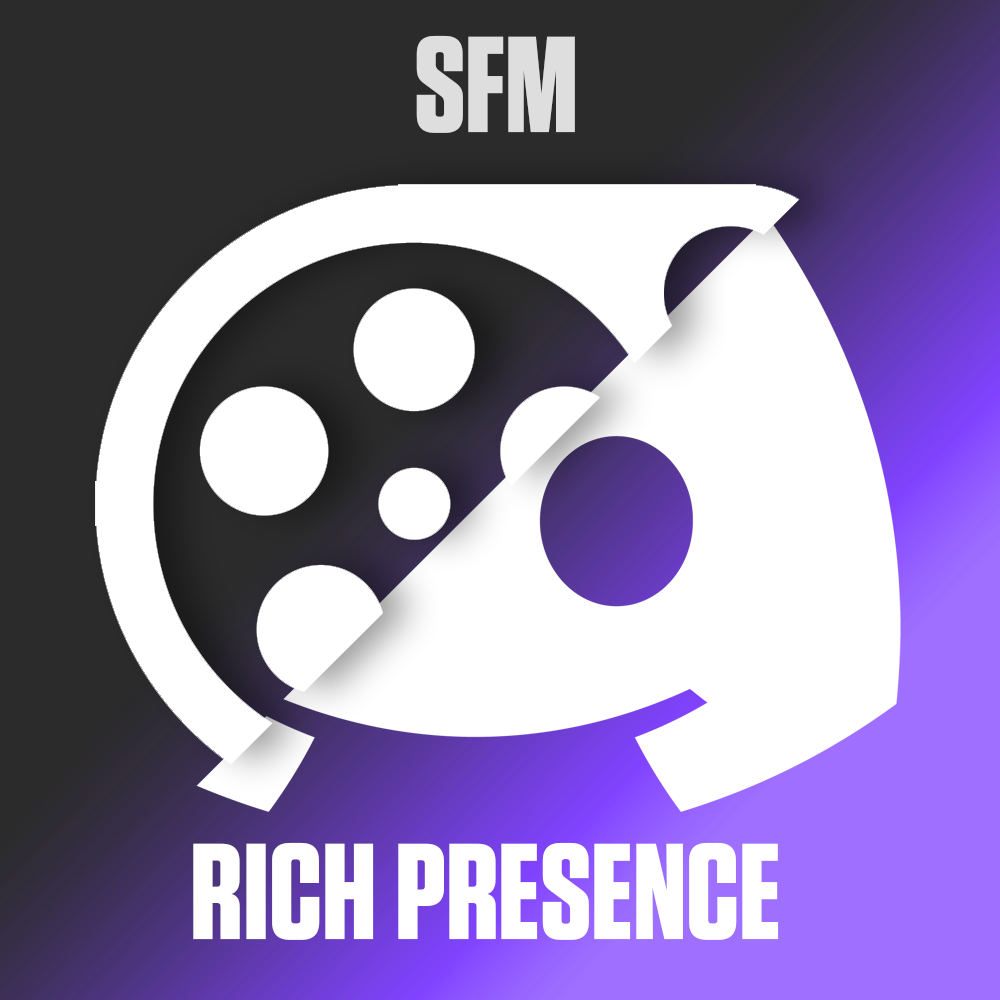
<style>
.page{position:relative;width:1000px;height:1000px;background:#ffffff}
.page>*{position:absolute;margin:0}
.t1{font:136.4px "Tungsten-Bold";color:#dedede}
.t2{font:136.4px "Tungsten-Bold";color:#ffffff}
</style>
<div class="page">
<p class="t1" style="left:416px;top:35px;width:159px;height:98px">SFM</p>
<p class="t2" style="left:193px;top:842px;width:586px;height:98px">RICH PRESENCE</p>
</div>
